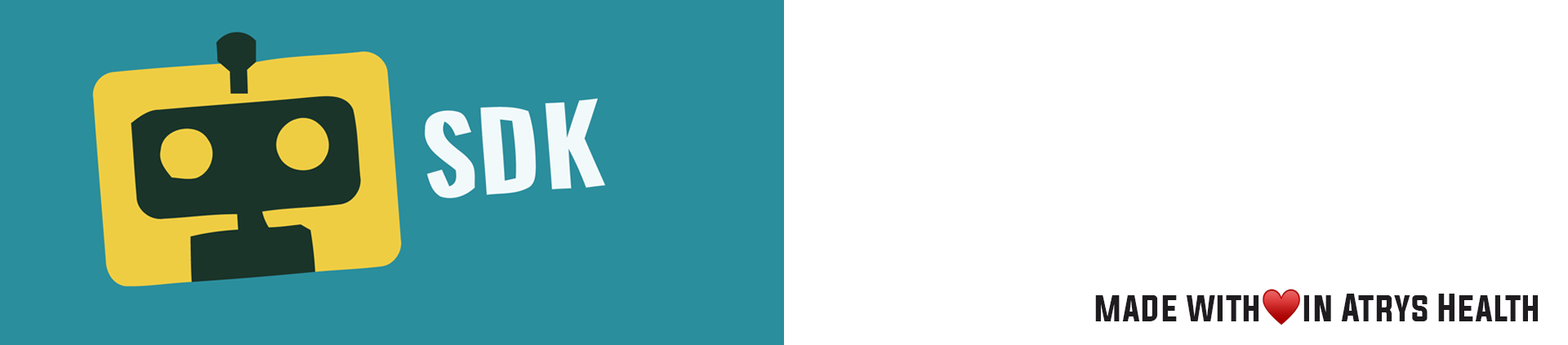
<style>
.page{position:relative;width:1568px;height:345px;background:#ffffff}
.page>*{position:absolute;margin:0}
.t1{font:32.7px "Evogria";color:#1e1c1f}
</style>
<div class="page">
<p class="t1" style="left:1095px;top:294px;width:444px;height:28px">made with     in Atrys Health</p>
</div>
